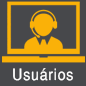
<style>
.page{position:relative;width:86px;height:86px;background:#47484b}
.page>*{position:absolute;margin:0}
.t1{font:15.6px "Helvetica-Normal";letter-spacing:0.06em;color:#ffffff;scale:0.89 1}
</style>
<div class="page">
<p class="t1" style="left:13px;top:68px;width:60px;height:13px">Usuários</p>
</div>
